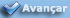
<style>
.page{position:relative;width:70px;height:18px}
.page>*{position:absolute;margin:0}
.t1{font:9.8px "Verdana-Bold";color:#deebf6}
</style>
<div class="page">
<p class="t1" style="left:22px;top:4px;width:46px;height:10px">Avançar</p>
</div>
